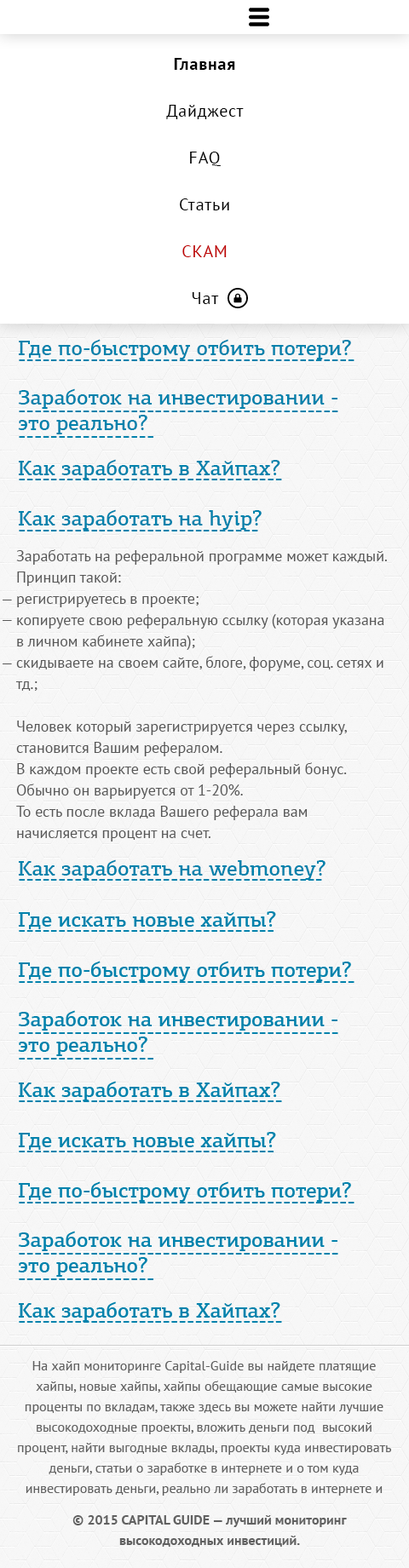
<style>
.page{position:relative;width:409px;height:1568px;background:#f7f7f7}
.page>*{position:absolute;margin:0}
.t1{font:17px/46.8px "PTSans-Regular";letter-spacing:0.04em;color:#000000}
.t2{font:17px/46.8px "PTSans-Bold";letter-spacing:0.04em;color:#000000}
.t3{font:17px/46.8px "PTSans-Regular";letter-spacing:0.04em;color:#bf0000}
.t4{font:21.3px "PFCentroSlabPro-Medium";color:#0082ac}
.t5{font:15.3px/21.3px "PTSans-Regular";color:#575757}
.t6{font:15.3px "PTSans-Regular";color:#575757}
.t7{font:13.6px/20.4px "PTSans-Regular";color:#616161}
.t8{font:13.6px/20.4px "PTSans-Bold";color:#616161}
</style>
<div class="page">
<p class="t1" style="left:166px;top:58px;width:78px;height:246px;text-align:center"><span class="t2">Главная<br></span>Дайджест<br>FAQ<br>Статьи<br><span class="t3">СКАМ<br></span>Чат</p>
<p class="t4" style="left:19px;top:339px;width:332px;height:20px">Где по-быстрому отбить потери?</p>
<p class="t4" style="left:19px;top:359px;width:335px;height:2px">------------------------------------------</p>
<p class="t4" style="left:18px;top:388px;width:319px;height:46px">Заработок на инвестировании - <br>это реально?</p>
<p class="t4" style="left:19px;top:411px;width:319px;height:27px">----------------------------------------<br>-----------------</p>
<p class="t4" style="left:19px;top:459px;width:261px;height:21px">Как заработать в Хайпах?</p>
<p class="t4" style="left:19px;top:479px;width:263px;height:1px">---------------------------------</p>
<p class="t4" style="left:19px;top:509px;width:242px;height:21px">Как заработать на hyip?</p>
<p class="t4" style="left:19px;top:530px;width:239px;height:1px">------------------------------</p>
<p class="t5" style="left:15px;top:549px;width:372px;height:292px">Заработать на реферальной программе может каждый. Принцип такой:<br>регистрируетесь в проекте;<br>копируете свою реферальную ссылку (которая указана в личном кабинете хайпа);<br>скидываете на своем сайте, блоге, форуме, соц. сетях и тд.;<br><br>Человек который зарегистрируется через ссылку, становится Вашим рефералом. <br>В каждом проекте есть свой реферальный бонус. Обычно он варьируется от 1-20%. <br>То есть после вклада Вашего реферала вам начисляется процент на счет.</p>
<p class="t6" style="left:3px;top:600px;width:9px;height:0px">—</p>
<p class="t6" style="left:3px;top:620px;width:9px;height:1px">—</p>
<p class="t6" style="left:3px;top:663px;width:9px;height:1px">—</p>
<p class="t4" style="left:19px;top:859px;width:306px;height:21px">Как заработать на webmoney?</p>
<p class="t4" style="left:19px;top:879px;width:303px;height:2px">--------------------------------------</p>
<p class="t7" style="left:18px;top:1361px;width:373px;height:135px;text-align:center">На хайп мониторинге Capital-Guide вы найдете платящие хайпы, новые хайпы, хайпы обещающие самые высокие проценты по вкладам, также здесь вы можете найти лучшие высокодоходные проекты, вложить деньги под  высокий процент, найти выгодные вклады, проекты куда инвестировать деньги, статьи о заработке в интернете и о том куда инвестировать деньги, реально ли заработать в интернете и куда лучше вложить деньги, как правильно вкладывать деньги, что такое финансовая пирамида и что такое хайп.</p>
<p class="t8" style="left:72px;top:1515px;width:275px;height:32px;text-align:center">© 2015 CAPITAL GUIDE — лучший мониторинг <br>высокодоходных инвестиций.</p>
</div>
